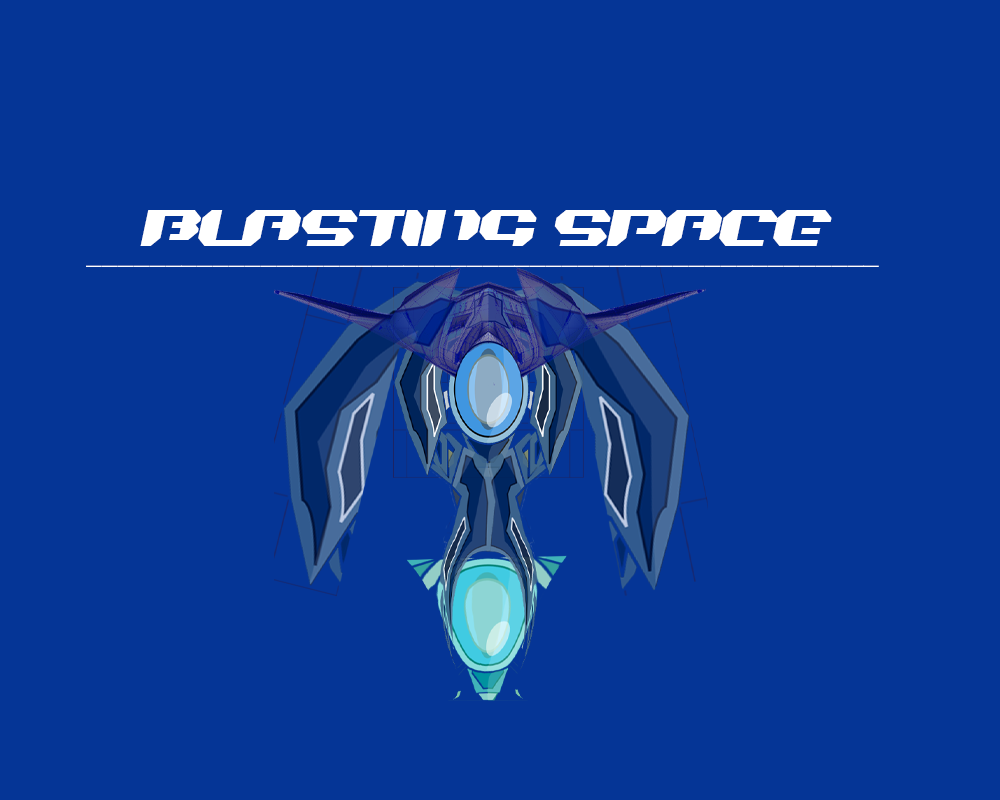
<style>
.page{position:relative;width:1000px;height:800px;background:#053596}
.page>*{position:absolute;margin:0}
.t1{font:36px "BionicKidSimpleSlanted";color:#ffffff}
.t2{font:23.9px "MyriadPro-Regular";color:#ffffff;scale:1.33 1}
</style>
<div class="page">
<p class="t1" style="left:140px;top:210px;width:692px;height:36px">BLASTING SPACE</p>
<p class="t2" style="left:86px;top:265px;width:793px;height:2px">__________________________________________________</p>
</div>
